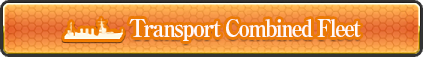
<style>
.page{position:relative;width:423px;height:57px}
.page>*{position:absolute;margin:0}
.t1{font:24px "RyuminPro-ExBold";letter-spacing:-0.08em;color:#fff9f9;scale:0.9 1}
</style>
<div class="page">
<p class="t1" style="left:129px;top:19px;width:232px;height:22px">Transport Combined Fleet</p>
</div>
